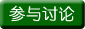
<style>
.page{position:relative;width:85px;height:29px;background:#036803}
.page>*{position:absolute;margin:0}
.t1{font:16px "YouYuan";color:#ffffff;font-weight:bold}
</style>
<div class="page">
<p class="t1" style="left:9px;top:5px;width:66px;height:17px">参与讨论</p>
</div>
